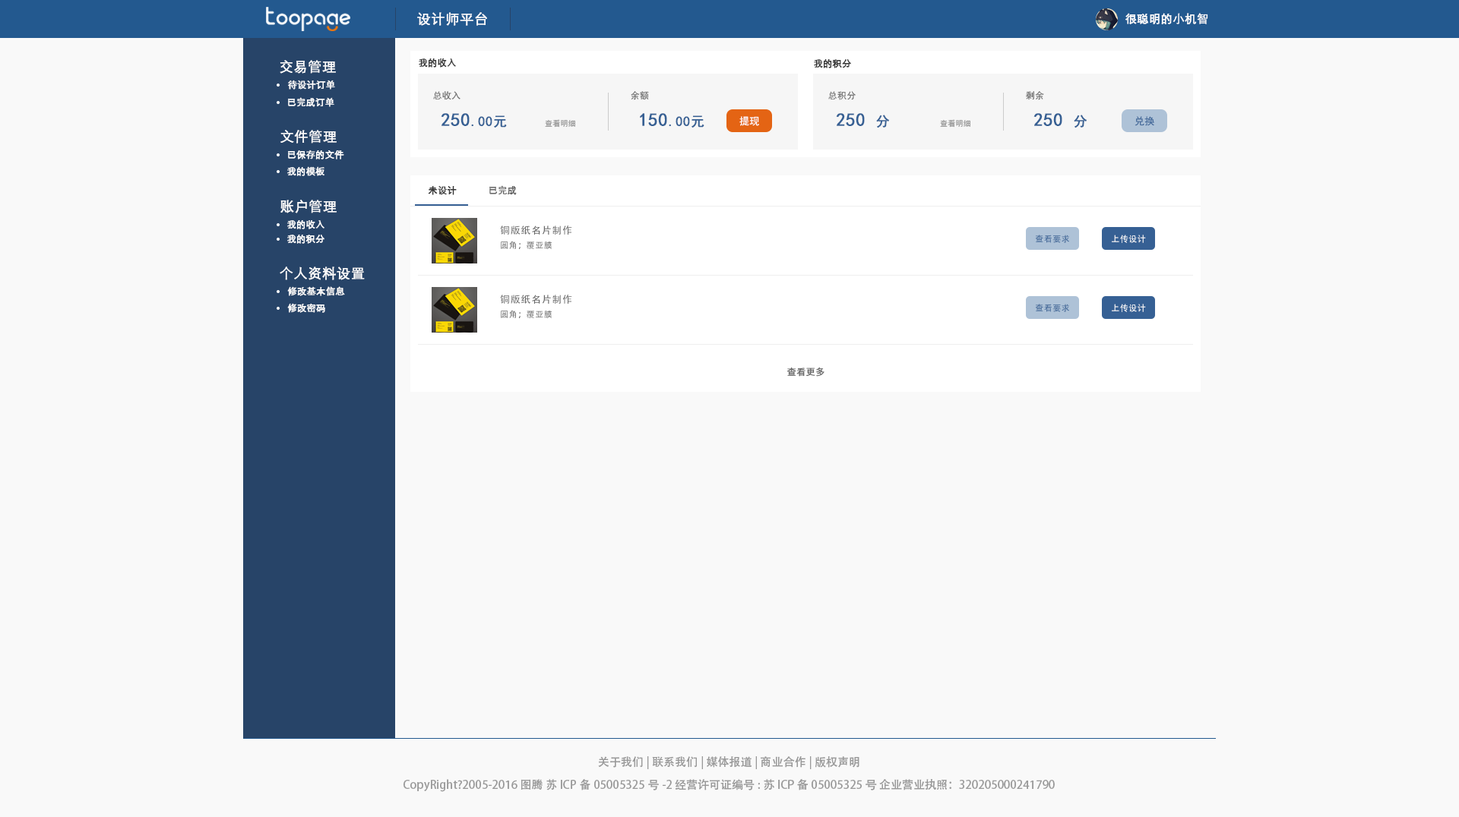
<style>
.page{position:relative;width:1459px;height:817px;background:#f9f9f9}
.page>*{position:absolute;margin:0}
.t1{font:13.7px "STXihei";letter-spacing:0.02em;color:#ffffff;text-transform:uppercase;font-weight:bold}
.t2{font:11.4px "STXihei";letter-spacing:0.02em;color:#ffffff;text-transform:uppercase;font-weight:bold}
.t3{font:9.1px "STXihei";letter-spacing:0.02em;color:#333333;text-transform:uppercase;font-weight:bold}
.t4{font:9.1px "STXihei";letter-spacing:0.02em;color:#ffffff;text-transform:uppercase;font-weight:bold}
.t5{font:9.1px "SimHei";letter-spacing:0.02em;color:#666666;text-transform:uppercase}
.t6{font:13.7px "SimHei";letter-spacing:0.02em;color:#366094;text-transform:uppercase;font-weight:bold}
.t7{font:18.2px "SimHei";letter-spacing:0.02em;color:#366094;text-transform:uppercase;font-weight:bold}
.t8{font:7.6px "SimHei";letter-spacing:0.02em;color:#999999;text-transform:uppercase}
.t9{font:9.9px "SimHei";letter-spacing:0.02em;color:#ffffff;text-transform:uppercase}
.t10{font:9.9px "SimHei";letter-spacing:0.02em;color:#366094;text-transform:uppercase}
.t11{font:9.1px "STXihei";letter-spacing:0.02em;color:#666666;text-transform:uppercase;font-weight:bold}
.t12{font:9.9px "AdobeHeitiStd-Regular";letter-spacing:0.05em;color:#666666}
.t13{font:8.4px "AdobeHeitiStd-Regular";letter-spacing:0.05em;color:#666666}
.t14{font:8.4px "AdobeHeitiStd-Regular";letter-spacing:0.05em;color:#366094}
.t15{font:8.4px "AdobeHeitiStd-Regular";letter-spacing:0.05em;color:#ffffff}
.t16{font:11.4px/22.8px "AdobeHeitiStd-Regular";color:#999999}
</style>
<div class="page">
<p class="t1" style="left:417px;top:12px;width:70px;height:14px">设计师平台</p>
<p class="t2" style="left:1125px;top:13px;width:83px;height:11px">很聪明的小机智</p>
<p class="t1" style="left:280px;top:60px;width:56px;height:14px">交易管理</p>
<p class="t3" style="left:419px;top:58px;width:37px;height:10px">我的收入</p>
<p class="t3" style="left:814px;top:59px;width:37px;height:9px">我的积分</p>
<p class="t4" style="left:288px;top:80px;width:47px;height:10px">待设计订单</p>
<p class="t4" style="left:288px;top:97px;width:46px;height:10px">已完成订单</p>
<p class="t5" style="left:433px;top:91px;width:27px;height:9px">总收入</p>
<p class="t5" style="left:631px;top:91px;width:18px;height:9px">余额</p>
<p class="t5" style="left:828px;top:91px;width:27px;height:9px">总积分</p>
<p class="t5" style="left:1026px;top:91px;width:18px;height:9px">剩余</p>
<p class="t6" style="left:441px;top:113px;width:66px;height:15px"><span class="t7">250</span>.00元</p>
<p class="t6" style="left:640px;top:113px;width:64px;height:15px"><span class="t7">150</span>.00元</p>
<p class="t7" style="left:836px;top:113px;width:53px;height:15px">250 <span class="t6">分</span></p>
<p class="t7" style="left:1033px;top:113px;width:53px;height:15px">250 <span class="t6">分</span></p>
<p class="t8" style="left:545px;top:119px;width:30px;height:9px">查看明细</p>
<p class="t9" style="left:739px;top:116px;width:20px;height:10px">提现</p>
<p class="t8" style="left:940px;top:119px;width:30px;height:9px">查看明细</p>
<p class="t10" style="left:1134px;top:116px;width:20px;height:10px">兑换</p>
<p class="t1" style="left:280px;top:130px;width:57px;height:14px">文件管理</p>
<p class="t4" style="left:288px;top:150px;width:56px;height:10px">已保存的文件</p>
<p class="t4" style="left:287px;top:166px;width:37px;height:10px">我的模板</p>
<p class="t3" style="left:428px;top:185px;width:29px;height:10px">未设计</p>
<p class="t11" style="left:489px;top:185px;width:28px;height:10px">已完成</p>
<p class="t1" style="left:280px;top:200px;width:57px;height:13px">账户管理</p>
<p class="t4" style="left:287px;top:220px;width:37px;height:9px">我的收入</p>
<p class="t12" style="left:500px;top:226px;width:72px;height:9px">铜版纸名片制作</p>
<p class="t4" style="left:287px;top:235px;width:37px;height:9px">我的积分</p>
<p class="t13" style="left:501px;top:241px;width:51px;height:8px">圆角；覆亚膜</p>
<p class="t14" style="left:1035px;top:235px;width:34px;height:8px">查看要求</p>
<p class="t15" style="left:1111px;top:235px;width:35px;height:8px">上传设计</p>
<p class="t1" style="left:280px;top:267px;width:85px;height:13px">个人资料设置</p>
<p class="t4" style="left:287px;top:286px;width:58px;height:10px">修改基本信息</p>
<p class="t4" style="left:287px;top:303px;width:38px;height:10px">修改密码</p>
<p class="t12" style="left:500px;top:295px;width:72px;height:9px">铜版纸名片制作</p>
<p class="t14" style="left:1035px;top:304px;width:34px;height:8px">查看要求</p>
<p class="t15" style="left:1111px;top:304px;width:35px;height:8px">上传设计</p>
<p class="t13" style="left:501px;top:310px;width:51px;height:8px">圆角；覆亚膜</p>
<p class="t11" style="left:786px;top:367px;width:38px;height:10px">查看更多</p>
<p class="t16" style="left:403px;top:757px;width:652px;height:35px;text-align:center">关于我们| 联系我们| 媒体报道| 商业合作| 版权声明<br>CopyRight?2005-2016 图腾 苏ICP备05005325号-2 经营许可证编号:苏ICP备05005325号 企业营业执照：320205000241790</p>
</div>
